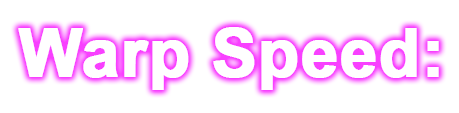
<style>
.page{position:relative;width:459px;height:113px;background:#ffffff}
.page>*{position:absolute;margin:0}
.t1{font:66.7px "Arial-BoldMT";color:#ffffff;font-weight:bold}
</style>
<div class="page">
<p class="t1" style="left:18px;top:27px;width:421px;height:63px">Warp Speed:</p>
</div>
